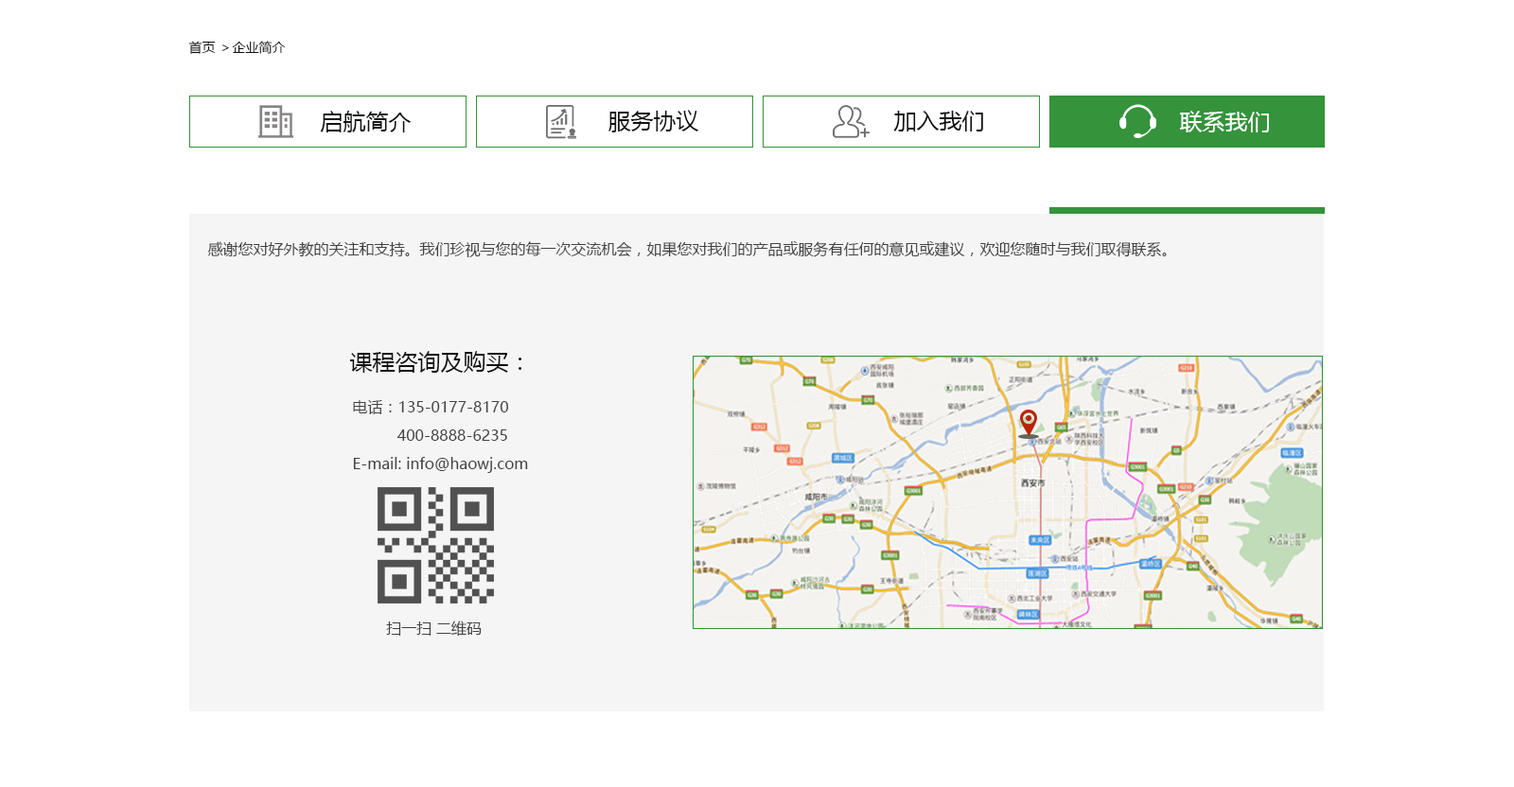
<style>
.page{position:relative;width:1514px;height:787px;background:#ffffff}
.page>*{position:absolute;margin:0}
.t1{font:13.3px "MicrosoftYaHei";color:#111111}
.t2{font:22.7px "MicrosoftYaHei";color:#111111}
.t3{font:22.7px "MicrosoftYaHei";color:#ffffff}
.t4{font:15.1px "MicrosoftYaHei";color:#444343}
.t5{font:15.1px/28.4px "MicrosoftYaHei";color:#444343}
</style>
<div class="page">
<p class="t1" style="left:188px;top:41px;width:98px;height:13px">首页 ＞企业简介</p>
<p class="t2" style="left:320px;top:111px;width:92px;height:22px">启航简介</p>
<p class="t2" style="left:608px;top:110px;width:90px;height:23px">服务协议</p>
<p class="t2" style="left:893px;top:111px;width:90px;height:21px">加入我们</p>
<p class="t3" style="left:1179px;top:111px;width:90px;height:22px">联系我们</p>
<p class="t4" style="left:208px;top:241px;width:959px;height:16px">感谢您对好外教的关注和支持。我们珍视与您的每一次交流机会，如果您对我们的产品或服务有任何的意见或建议，欢迎您随时与我们取得联系。</p>
<p class="t2" style="left:350px;top:351px;width:171px;height:22px">课程咨询及购买：</p>
<p class="t5" style="left:353px;top:400px;width:175px;height:73px">电话：135-0177-8170<br>          400-8888-6235<br>E-mail: info@haowj.com</p>
<p class="t4" style="left:386px;top:621px;width:96px;height:15px">扫一扫 二维码</p>
</div>
